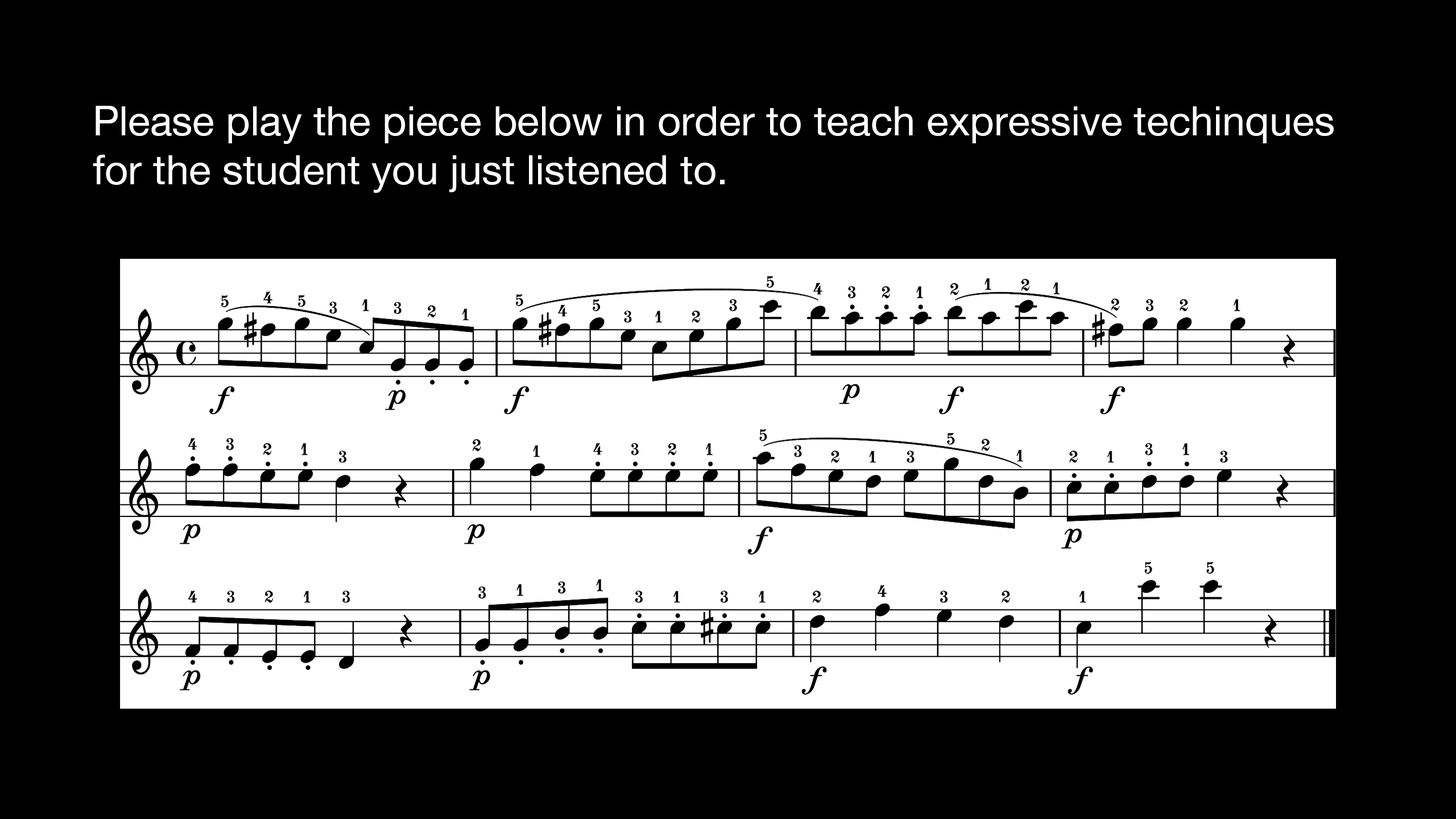
<style>
.page{position:relative;width:1456px;height:819px;background:#000000}
.page>*{position:absolute;margin:0}
.t1{font:40.9px "HelveticaNeue";color:#ffffff}
</style>
<div class="page">
<p class="t1" style="left:93px;top:106px;width:1241px;height:87px">Please play the piece below in order to teach expressive techinques<br>for the student you just listened to.</p>
</div>
